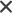
<style>
.page{position:relative;width:12px;height:13px;background:#ffffff}
.page>*{position:absolute;margin:0}
.t1{font:30px "Calibri";color:#3c3c3c}
</style>
<div class="page">
<p class="t1" style="left:0px;top:0px;width:12px;height:13px">×</p>
</div>
